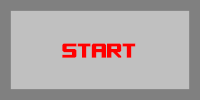
<style>
.page{position:relative;width:200px;height:100px;background:#c0c0c0}
.page>*{position:absolute;margin:0}
.t1{font:14px "MINE-SWEEPER";color:#ff0000}
</style>
<div class="page">
<p class="t1" style="left:62px;top:43px;width:74px;height:15px">Start</p>
</div>
